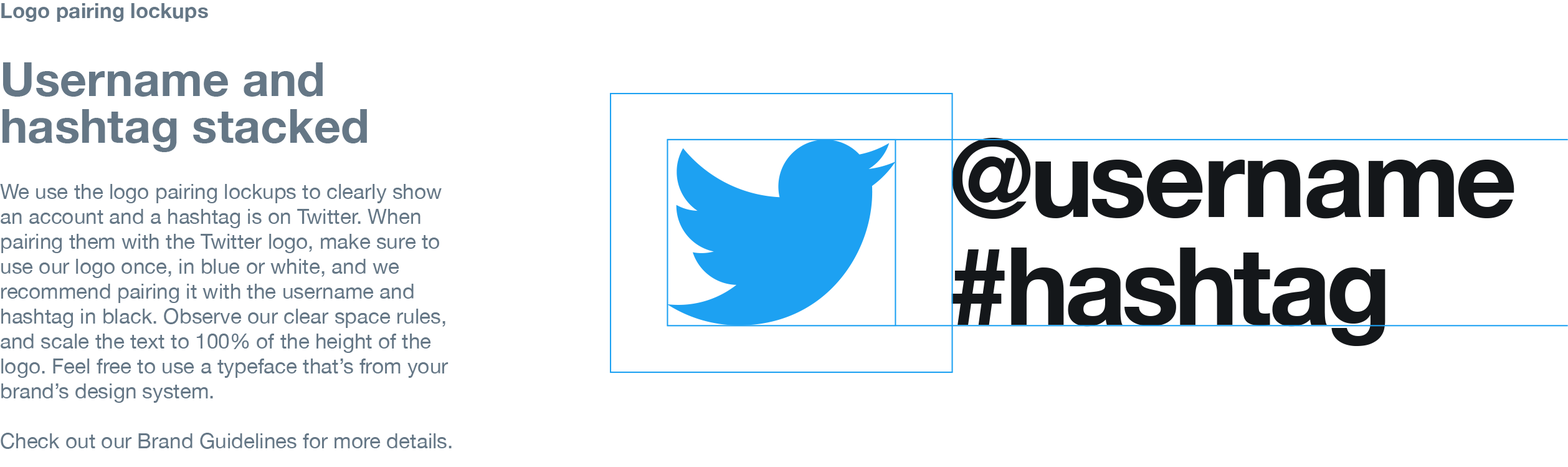
<style>
.page{position:relative;width:1568px;height:467px;background:#ffffff}
.page>*{position:absolute;margin:0}
.t1{font:20.8px "HelveticaNeue";color:#657786}
.t2{font:20.8px/46.7px "HelveticaNeue-Bold";color:#657786}
.t3{font:46.7px/46.7px "HelveticaNeue-Bold";color:#657786}
.t4{font:107.8px/107.8px "HelveticaNeue-Bold";letter-spacing:-0.025em;color:#14171a}
</style>
<div class="page">
<p class="t1" style="left:0px;top:3px;width:452px;height:446px"><span class="t2">Logo pairing lockups<br><br></span><span class="t3">Username and hashtag stacked<br><br></span>We use the logo pairing lockups to clearly show an account and a hashtag is on Twitter. When pairing them with the Twitter logo, make sure to use our logo once, in blue or white, and we recommend pairing it with the username and hashtag in black. Observe our clear space rules, and scale the text to 100% of the height of the logo. Feel free to use a typeface that’s from your brand’s design system.<br><br>Check out our Brand Guidelines for more details.</p>
<p class="t4" style="left:951px;top:138px;width:563px;height:208px">@username<br>#hashtag</p>
</div>
